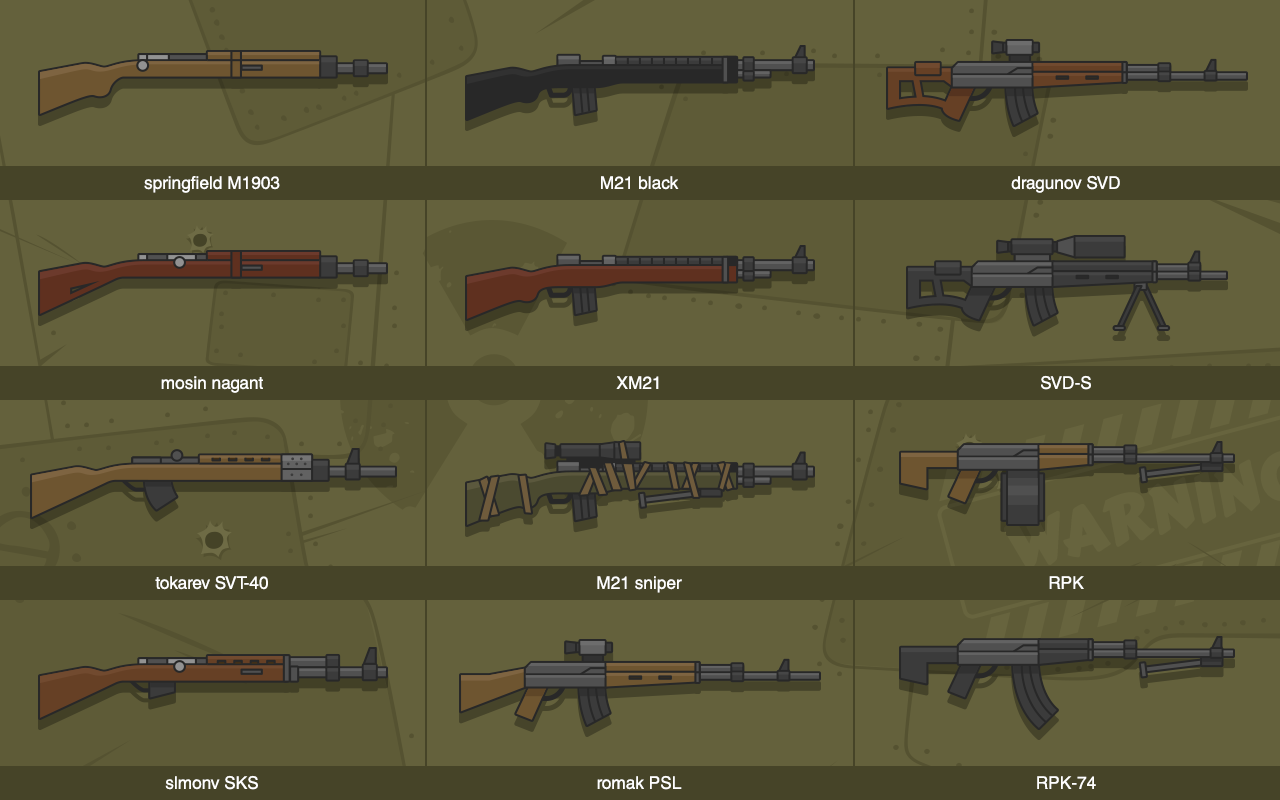
<style>
.page{position:relative;width:1280px;height:800px;background:#64613c}
.page>*{position:absolute;margin:0}
.t1{font:17.4px/200px "HelveticaCE-Regular";color:#ffffff}
</style>
<div class="page">
<p class="t1" style="left:144px;top:176px;width:136px;height:614px;text-align:center">springfield M1903<br>mosin nagant<br>tokarev SVT-40<br>slmonv SKS</p>
<p class="t1" style="left:597px;top:176px;width:85px;height:614px;text-align:center">M21 black<br>XM21<br>M21 sniper<br>romak PSL</p>
<p class="t1" style="left:1011px;top:175px;width:109px;height:614px;text-align:center">dragunov SVD<br>SVD-S<br>RPK<br>RPK-74</p>
</div>
